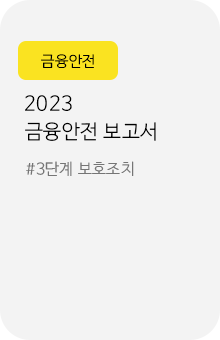
<style>
.page{position:relative;width:220px;height:340px;background:#f3f3f3}
.page>*{position:absolute;margin:0}
.t1{font:14.9px "NanumBarunGothicOTFLight";letter-spacing:0.025em;color:#000000}
.t2{font:20px "NanumBarunGothicOTFLight";letter-spacing:0.025em;color:#000000}
.t3{font:15.6px "NanumBarunGothicOTFLight";letter-spacing:0.025em;color:#757575}
</style>
<div class="page">
<p class="t1" style="left:41px;top:54px;width:53px;height:14px">금융안전</p>
<p class="t2" style="left:25px;top:95px;width:47px;height:16px">2023</p>
<p class="t2" style="left:25px;top:122px;width:131px;height:19px">금융안전 보고서</p>
<p class="t3" style="left:26px;top:161px;width:108px;height:15px">#3단계 보호조치</p>
</div>
